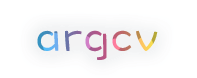
<style>
.page{position:relative;width:197px;height:78px;background:#ffffff}
.page>*{position:absolute;margin:0}
.t1{font:48px "DFWaWaSC-W5";letter-spacing:0.05em}
</style>
<div class="page">
<p class="t1" style="left:37px;top:30px;width:121px;height:30px">argcv</p>
</div>
